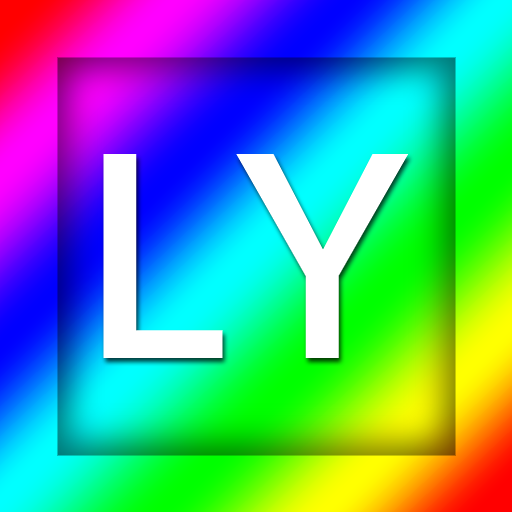
<style>
.page{position:relative;width:512px;height:512px}
.page>*{position:absolute;margin:0}
.t1{font:250px "OPPOSans-B";color:#ffffff}
</style>
<div class="page">
<p class="t1" style="left:103px;top:154px;width:306px;height:204px">LY</p>
</div>
